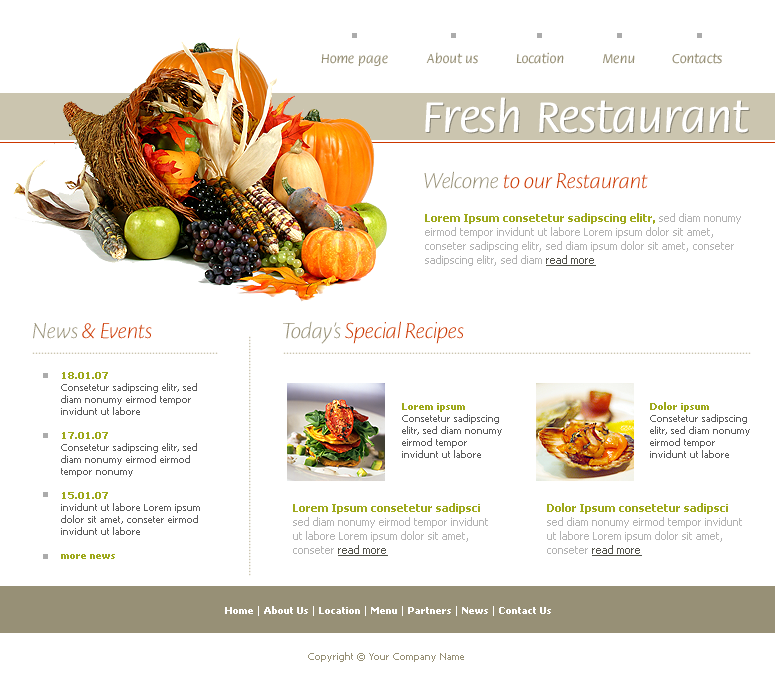
<style>
.page{position:relative;width:775px;height:680px;background:#ffffff}
.page>*{position:absolute;margin:0}
.t1{font:14px "FloraStd-Medium";color:#979076}
.t2{font:47px "FloraStd-Medium";color:#ffffff}
.t3{font:24px "CronosPro-LtDispIt";color:#cc3700}
.t4{font:24px "CronosPro-LtDispIt";color:#979076}
.t5{font:11px/14px "Tahoma";color:#b3b3b3}
.t6{font:11px/14px "Tahoma-Bold";color:#9ea91c}
.t7{font:11px/14px "Tahoma";color:#53534b;text-decoration:underline}
.t8{font:10px "Tahoma";color:#5c5c5c}
.t9{font:10px "Tahoma-Bold";color:#9ea91c}
.t10{font:10px "Tahoma-Bold";color:#ffffff}
.t11{font:10px "Tahoma";color:#ffffff}
.t12{font:10px "Tahoma";color:#979076}
</style>
<div class="page">
<p class="t1" style="left:321px;top:54px;width:67px;height:12px">Home page</p>
<p class="t1" style="left:426px;top:52px;width:52px;height:12px">About us</p>
<p class="t1" style="left:516px;top:52px;width:48px;height:12px">Location</p>
<p class="t1" style="left:603px;top:54px;width:32px;height:10px">Menu</p>
<p class="t1" style="left:672px;top:53px;width:50px;height:11px">Contacts</p>
<p class="t2" style="left:425px;top:97px;width:324px;height:36px">Fresh Restaurant</p>
<p class="t3" style="left:424px;top:171px;width:224px;height:18px"><span class="t4">Welcome </span>to our Restaurant</p>
<p class="t5" style="left:425px;top:213px;width:316px;height:53px"><span class="t6">Lorem Ipsum consetetur sadipscing elitr, </span>sed diam nonumy eirmod tempor invidunt ut labore Lorem ipsum dolor sit amet, conseter sadipscing elitr, sed diam ipsum dolor sit amet, conseter sadipscing elitr, sed diam <span class="t7">read more</span></p>
<p class="t3" style="left:33px;top:323px;width:119px;height:16px"><span class="t4">News </span>&amp; Events</p>
<p class="t3" style="left:283px;top:321px;width:181px;height:23px"><span class="t4">Today’s </span>Special Recipes</p>
<p class="t8" style="left:61px;top:372px;width:139px;height:187px"><span class="t9">18.01.07<br></span>Consetetur sadipscing elitr, sed diam nonumy eirmod tempor invidunt ut labore <br><br><span class="t9">17.01.07<br></span>Consetetur sadipscing elitr, sed diam nonumy eirmod eirmod tempor nonumy <br><br><span class="t9">15.01.07<br></span>invidunt ut labore Lorem ipsum dolor sit amet, conseter eirmod <br>invidunt ut labore <br><br><span class="t9">more news</span></p>
<p class="t8" style="left:402px;top:403px;width:100px;height:55px"><span class="t9">Lorem ipsum<br></span>Consetetur sadipscing elitr, sed diam nonumy eirmod tempor invidunt ut labore</p>
<p class="t8" style="left:650px;top:402px;width:100px;height:56px"><span class="t9">Dolor ipsum<br></span>Consetetur sadipscing elitr, sed diam nonumy eirmod tempor invidunt ut labore</p>
<p class="t5" style="left:293px;top:503px;width:195px;height:53px"><span class="t6">Lorem Ipsum consetetur sadipsci  </span>sed diam nonumy eirmod tempor invidunt ut labore Lorem ipsum dolor sit amet, conseter <span class="t7">read more</span></p>
<p class="t5" style="left:547px;top:503px;width:195px;height:53px"><span class="t6">Dolor Ipsum consetetur sadipsci  </span>sed diam nonumy eirmod tempor invidunt ut labore Lorem ipsum dolor sit amet, conseter <span class="t7">read more</span></p>
<p class="t10" style="left:225px;top:606px;width:326px;height:10px"><span class="t11">  </span>Home <span class="t11">| </span>About Us <span class="t11">| </span>Location <span class="t11">| </span>Menu <span class="t11">| </span>Partners <span class="t11">| </span>News <span class="t11">| </span>Contact Us</p>
<p class="t12" style="left:308px;top:652px;width:156px;height:10px">Copyright © Your Company Name</p>
</div>
